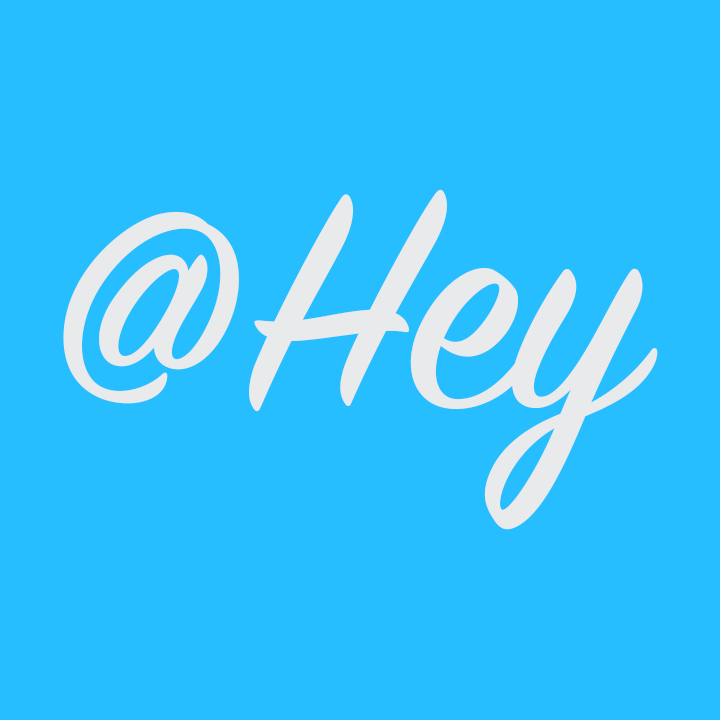
<style>
.page{position:relative;width:720px;height:720px;background:#26beff}
.page>*{position:absolute;margin:0}
.t1{font:341.7px "SignPainter-HouseScript";color:#e9eaec}
</style>
<div class="page">
<p class="t1" style="left:63px;top:189px;width:595px;height:341px">@Hey</p>
</div>
